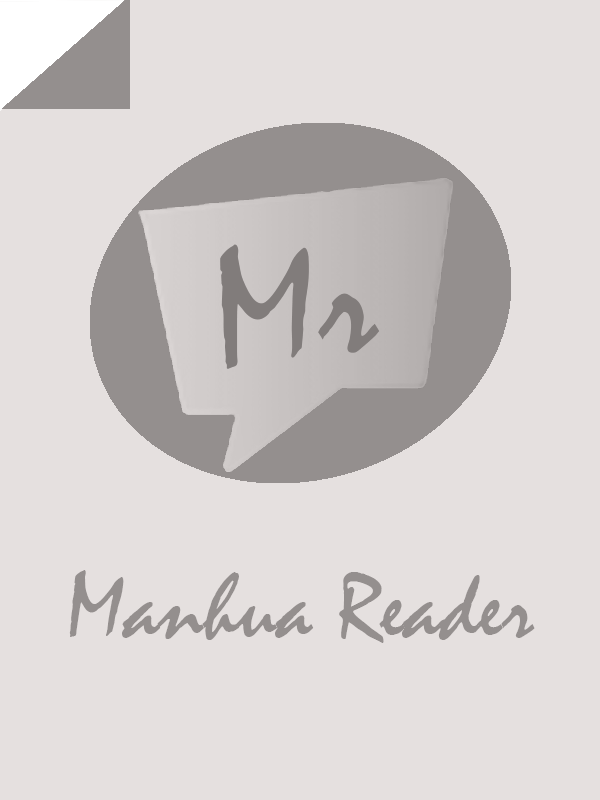
<style>
.page{position:relative;width:600px;height:800px;background:#e5e0df}
.page>*{position:absolute;margin:0}
.t1{font:95.6px "Mistral";color:#948f8e}
</style>
<div class="page">
<p class="t1" style="left:69px;top:570px;width:466px;height:73px">Manhua Reader</p>
</div>
